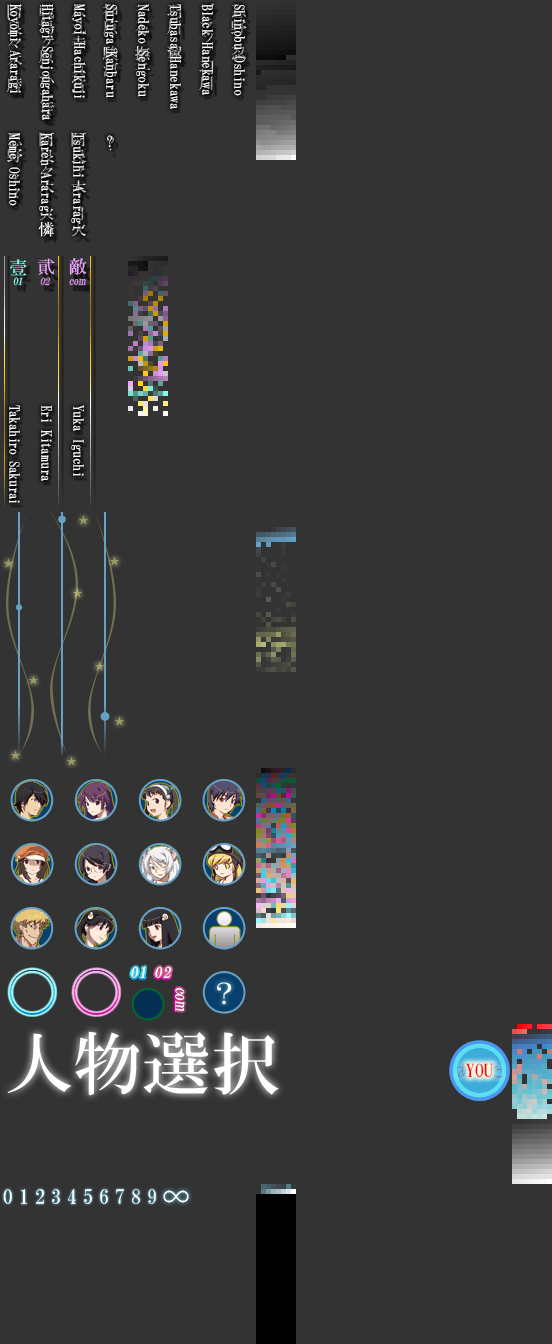
<style>
.page{position:relative;width:552px;height:1344px;background:#333333}
.page>*{position:absolute;margin:0}
.t1{font:14px/32px "HGMinchoB";letter-spacing:-0.025em;color:#ffffff}
.t2{font:14px/32px "HGMinchoB";letter-spacing:-0.05em;color:#ffffff}
.t3{font:14px "HGMinchoB";letter-spacing:-0.05em;color:#ffffff}
.t4{font:14px/32px "HGMinchoB";letter-spacing:-0.045em;color:#ffffff}
.t5{font:18px "HGMinchoB";color:#ff0000}
</style>
<div class="page">
<p class="t1" style="left:8px;top:4px;width:237px;height:116px;rotate:90deg">Shinobu Oshino<br>Black Hanekawa<br>Tsubasa Hanekawa<br>Nadeko Sengoku<br>Suruga Kanbaru<br>Mayoi Hachikuji<br><span class="t2">Hitagi Senjougahara<br></span>Koyomi Araragi</p>
<p class="t1" style="left:9px;top:133px;width:75px;height:96px;rotate:90deg">Tsukihi Araragi<br>Karen Araragi<br>Meme Oshino</p>
<p class="t3" style="left:107px;top:135px;width:5px;height:12px">?</p>
<p class="t1" style="left:9px;top:405px;width:75px;height:98px;rotate:90deg">Yuka Iguchi<br>Eri Kitamura<br><span class="t4">Takahiro Sakurai</span></p>
<p class="t5" style="left:466px;top:1063px;width:27px;height:15px">YOU</p>
</div>
